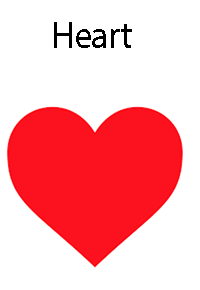
<style>
.page{position:relative;width:200px;height:290px;background:#ffffff}
.page>*{position:absolute;margin:0}
.t1{font:37.5px "MyriadPro-Regular";letter-spacing:-0.025em;color:#000000}
</style>
<div class="page">
<p class="t1" style="left:54px;top:22px;width:78px;height:26px">Heart</p>
</div>
